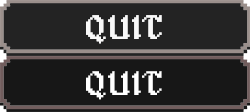
<style>
.page{position:relative;width:250px;height:112px;background:#232323}
.page>*{position:absolute;margin:0}
.t1{font:34.5px "Alagard";color:#ffffff}
</style>
<div class="page">
<p class="t1" style="left:86px;top:15px;width:76px;height:29px">QUIT</p>
<p class="t1" style="left:86px;top:71px;width:76px;height:29px">QUIT</p>
</div>
